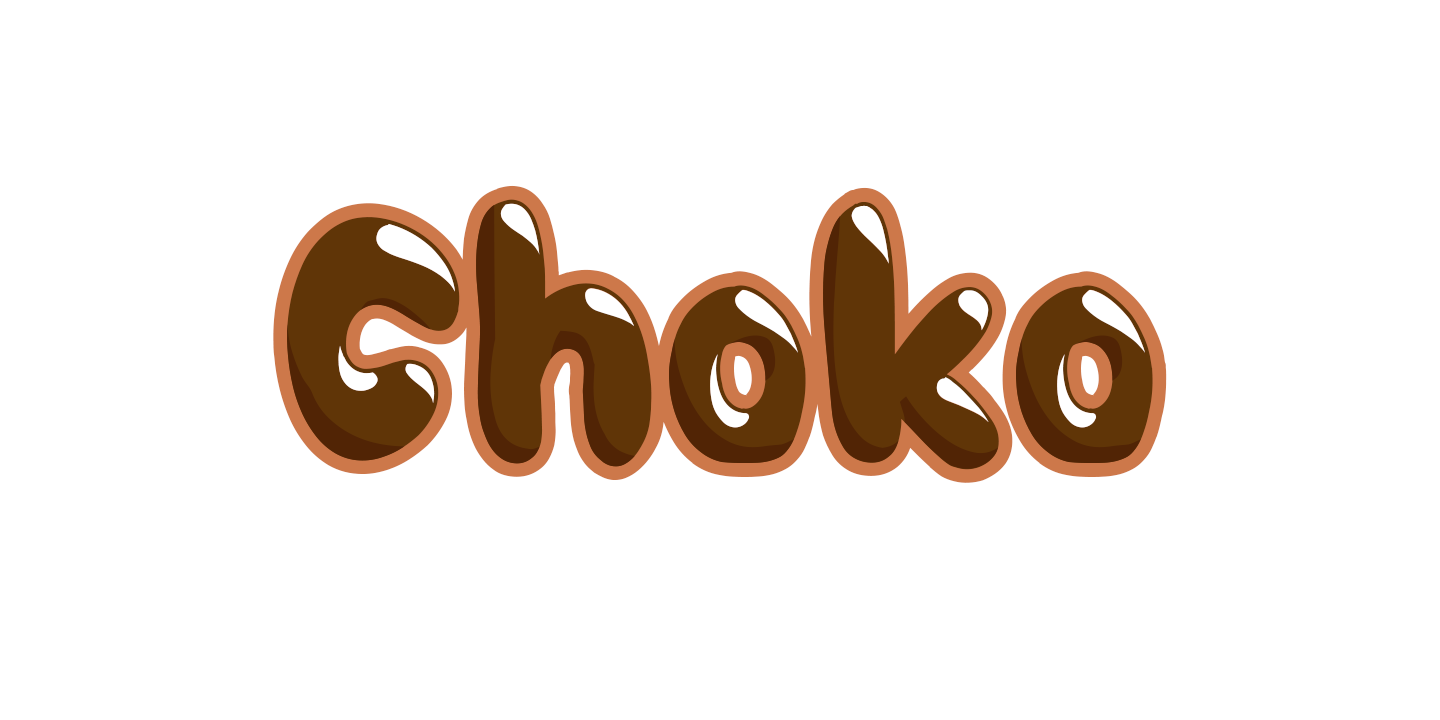
<style>
.page{position:relative;width:1440px;height:720px;background:#ffffff}
.page>*{position:absolute;margin:0}
.t1{font:342.3px "ChokoOutline"}
.t2{font:342.3px "Choko";color:#603507}
.t3{font:342.3px "ChokoShadow";color:#512405}
</style>
<div class="page">
<p class="t1" style="left:273px;top:185px;width:894px;height:298px">Choko</p>
<p class="t2" style="left:287px;top:199px;width:866px;height:271px">Choko</p>
<p class="t3" style="left:287px;top:205px;width:854px;height:264px">Choko</p>
</div>
